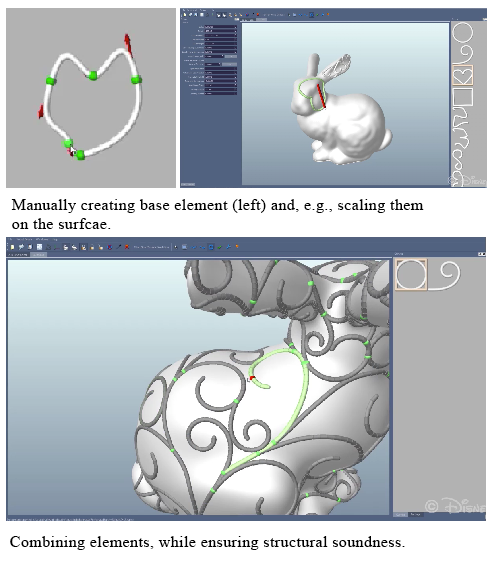
<style>
.page{position:relative;width:499px;height:561px;background:#ffffff}
.page>*{position:absolute;margin:0}
.t1{font:16px "TimesNewRomanPSMT";letter-spacing:0.025em;color:#000000}
</style>
<div class="page">
<p class="t1" style="left:11px;top:199px;width:413px;height:30px">Manually creating base element (left) and, e.g., scaling them <br>on the surfcae.</p>
<p class="t1" style="left:10px;top:536px;width:395px;height:14px">Combining elements, while ensuring structural soundness.</p>
</div>
